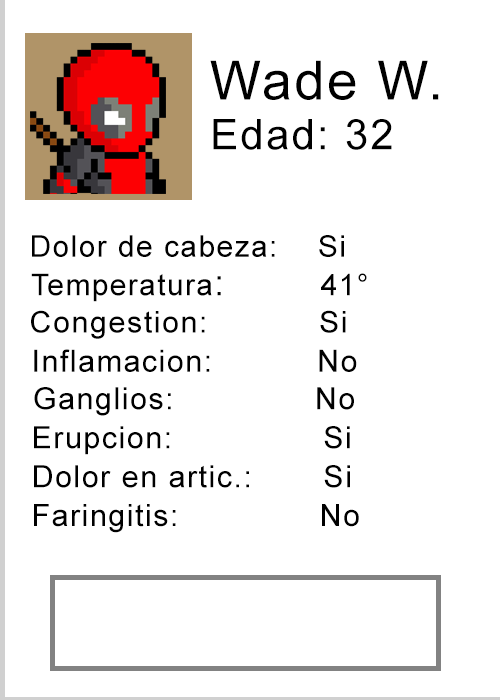
<style>
.page{position:relative;width:500px;height:700px;background:#ffffff}
.page>*{position:absolute;margin:0}
.t1{font:54.1px "ArialMT";letter-spacing:0.05em;color:#000000}
.t2{font:42.3px "ArialMT";letter-spacing:0.05em;color:#000000}
.t3{font:30px "ArialMT";letter-spacing:0.05em;color:#000000}
.t4{font:36.4px "ArialMT";letter-spacing:0.05em;color:#000000}
.t5{font:30.4px "ArialMT";letter-spacing:0.05em;color:#000000}
</style>
<div class="page">
<p class="t1" style="left:210px;top:60px;width:229px;height:40px">Wade W.</p>
<p class="t2" style="left:213px;top:119px;width:179px;height:31px">Edad: 32</p>
<p class="t3" style="left:32px;top:235px;width:312px;height:22px">Dolor de cabeza:    Si</p>
<p class="t3" style="left:31px;top:273px;width:336px;height:29px">Temperatura<span class="t4">:        </span>41°</p>
<p class="t3" style="left:31px;top:310px;width:315px;height:29px">Congestion:           Si</p>
<p class="t5" style="left:34px;top:349px;width:323px;height:23px">Inflamacion:          No</p>
<p class="t5" style="left:34px;top:387px;width:320px;height:29px">Ganglios:              No</p>
<p class="t5" style="left:34px;top:426px;width:316px;height:29px">Erupcion:               Si</p>
<p class="t5" style="left:34px;top:465px;width:316px;height:23px">Dolor en artic.:       Si</p>
<p class="t5" style="left:34px;top:504px;width:325px;height:29px">Faringitis:              No</p>
</div>
